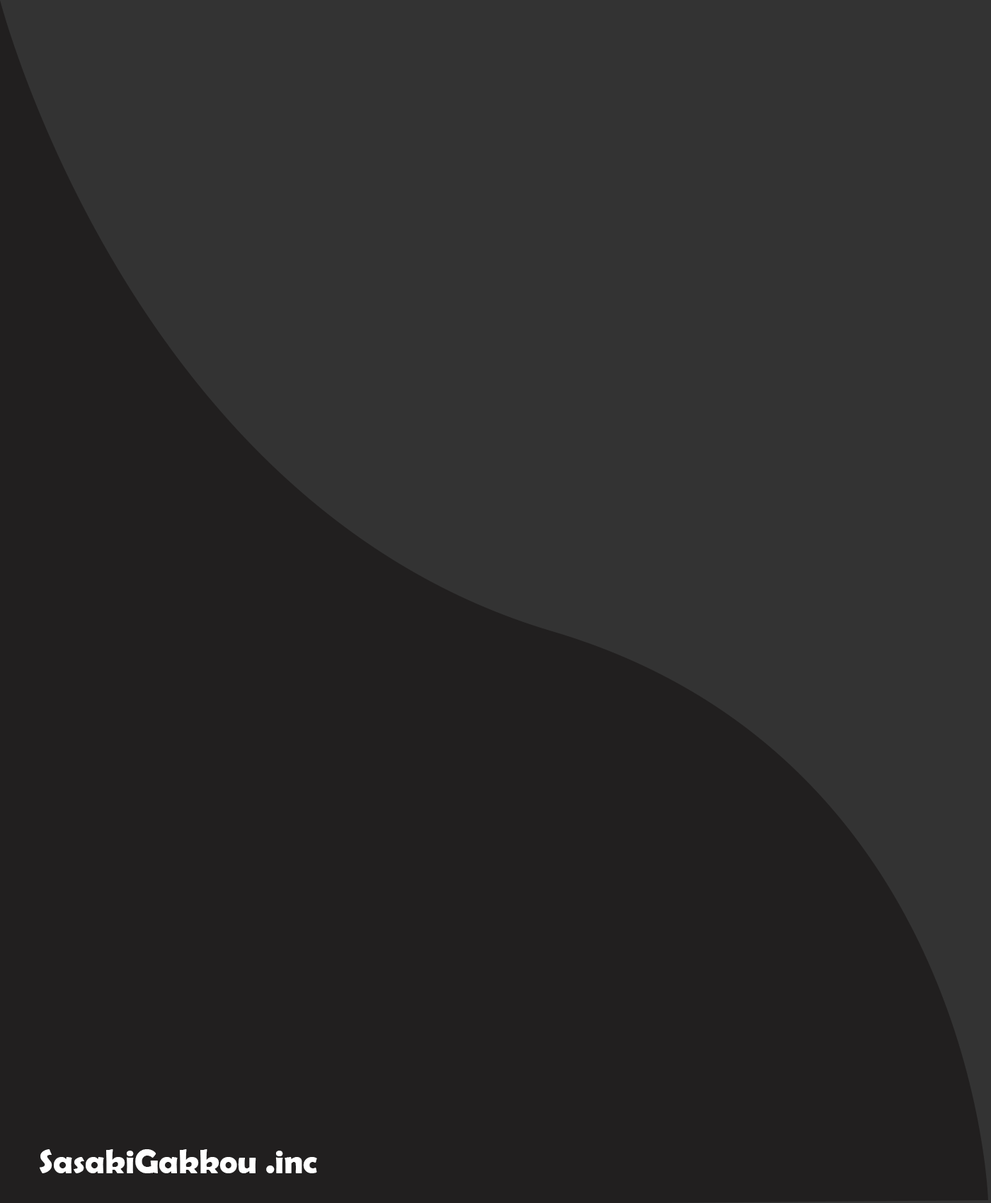
<style>
.page{position:relative;width:991px;height:1203px;background:#211f1f}
.page>*{position:absolute;margin:0}
.t1{font:34px "BerlinSansFBDemi-Bold";color:#ffffff}
</style>
<div class="page">
<p class="t1" style="left:40px;top:1150px;width:277px;height:24px">SasakiGakkou .inc</p>
</div>
